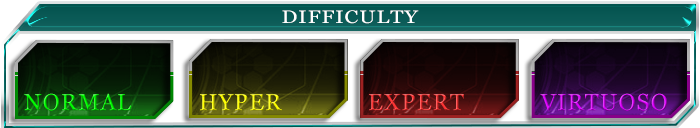
<style>
.page{position:relative;width:700px;height:128px}
.page>*{position:absolute;margin:0}
.t1{font:18.1px "Vani";letter-spacing:0.05em;color:#ffffff;scale:1.17 1}
.t2{font:23px "Vani";letter-spacing:0.05em}
</style>
<div class="page">
<p class="t1" style="left:282px;top:10px;width:137px;height:14px">DIFFICULTY</p>
<p class="t2" style="left:24px;top:93px;width:107px;height:18px">NORMAL</p>
<p class="t2" style="left:200px;top:94px;width:82px;height:17px">HYPER</p>
<p class="t2" style="left:369px;top:94px;width:95px;height:17px">EXPERT</p>
<p class="t2" style="left:540px;top:93px;width:127px;height:18px">VIRTUOSO</p>
</div>
